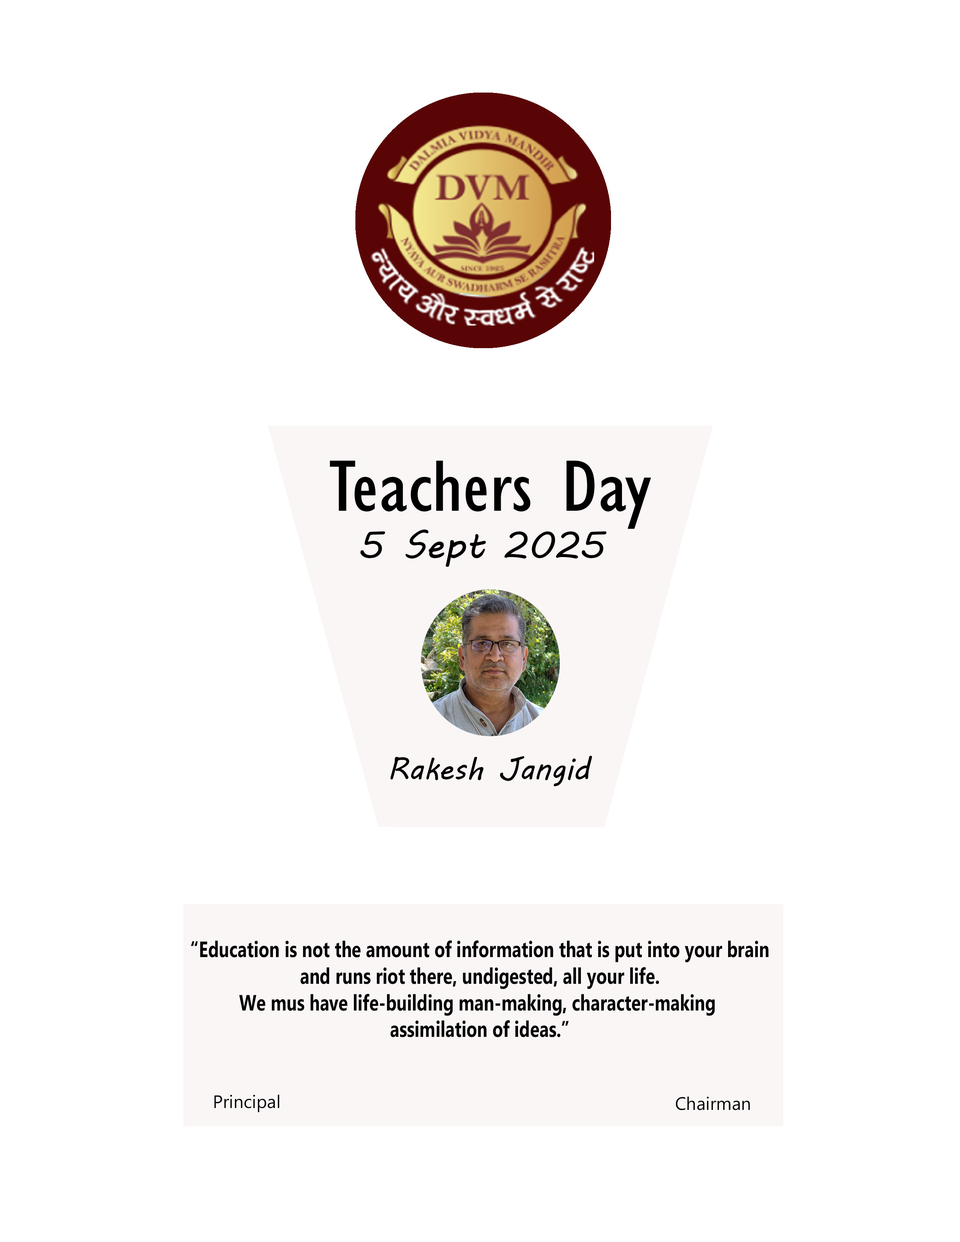
<style>
.page{position:relative;width:960px;height:1242px;background:#ffffff}
.page>*{position:absolute;margin:0}
.t1{font:74.9px "GillSansMT-Condensed";color:#000000;scale:1.16 1}
.t2{font:37.6px "MVBoli";color:#000000}
.t3{font:30.7px "MVBoli";color:#000000}
.t4{font:22.2px "MicrosoftPhagsPa-Bold";color:#000000;scale:0.78 1}
.t5{font:18.1px "MicrosoftPhagsPa";color:#000000}
</style>
<div class="page">
<p class="t1" style="left:330px;top:461px;width:321px;height:68px">Teachers Day</p>
<p class="t2" style="left:360px;top:530px;width:246px;height:37px">5 Sept 2025</p>
<p class="t3" style="left:390px;top:756px;width:202px;height:30px">Rakesh Jangid</p>
<p class="t4" style="left:191px;top:940px;width:578px;height:97px;text-align:center">“Education is not the amount of information that is put into your brain<br> and runs riot there, undigested, all your life. <br>We mus have life-building man-making, character-making <br>assimilation of ideas.”</p>
<p class="t5" style="left:214px;top:1095px;width:65px;height:17px">Principal</p>
<p class="t5" style="left:676px;top:1097px;width:74px;height:13px">Chairman</p>
</div>
